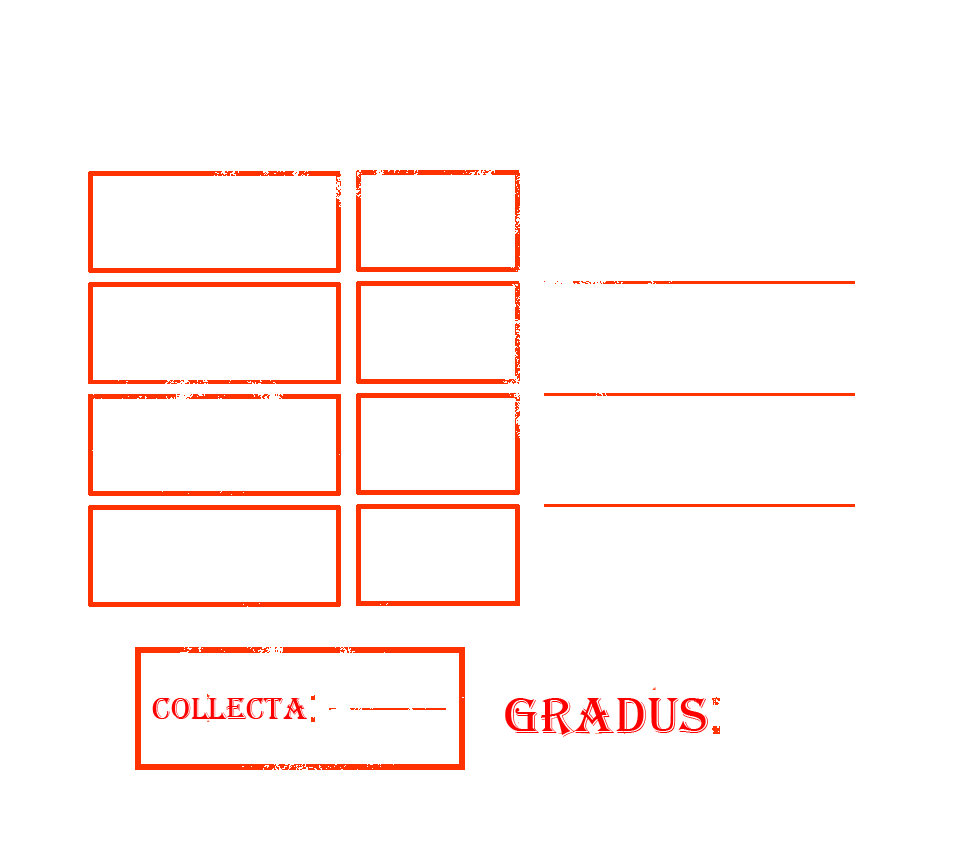
<style>
.page{position:relative;width:964px;height:864px;background:#ffffff}
.page>*{position:absolute;margin:0}
.t1{font:32px "Algerian";color:#fe0000}
.t2{font:53.3px "Algerian";color:#fe0000}
</style>
<div class="page">
<p class="t1" style="left:152px;top:698px;width:155px;height:21px">COLLECTA</p>
<p class="t2" style="left:505px;top:698px;width:203px;height:39px">GRADUS</p>
</div>
